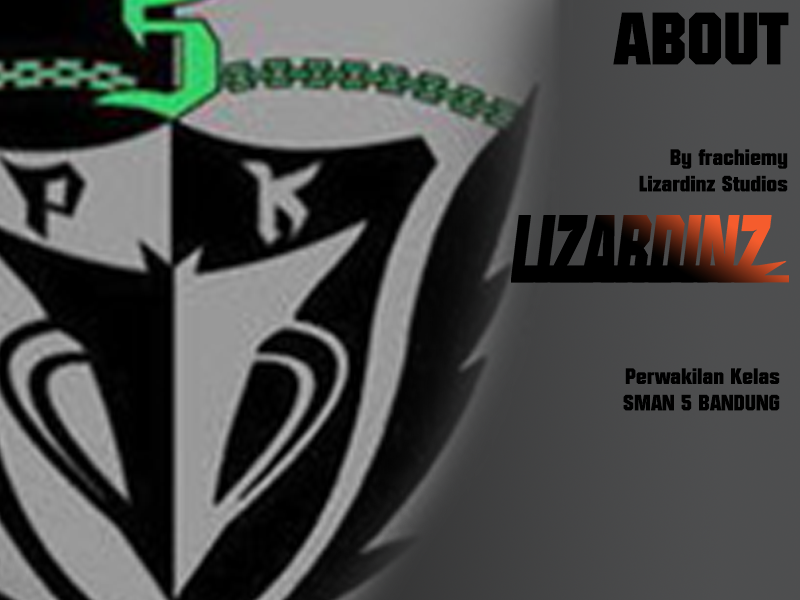
<style>
.page{position:relative;width:800px;height:600px}
.page>*{position:absolute;margin:0}
.t1{font:72px "Autumn";color:#000000}
.t2{font:22px "Autumn";color:#000000}
</style>
<div class="page">
<p class="t1" style="left:613px;top:12px;width:176px;height:53px">ABOUT</p>
<p class="t2" style="left:639px;top:149px;width:149px;height:43px;text-align:right">By frachiemy<br>Lizardinz Studios</p>
<p class="t2" style="left:623px;top:368px;width:157px;height:43px;text-align:right">Perwakilan Kelas<br>SMAN 5 BANDUNG</p>
</div>
